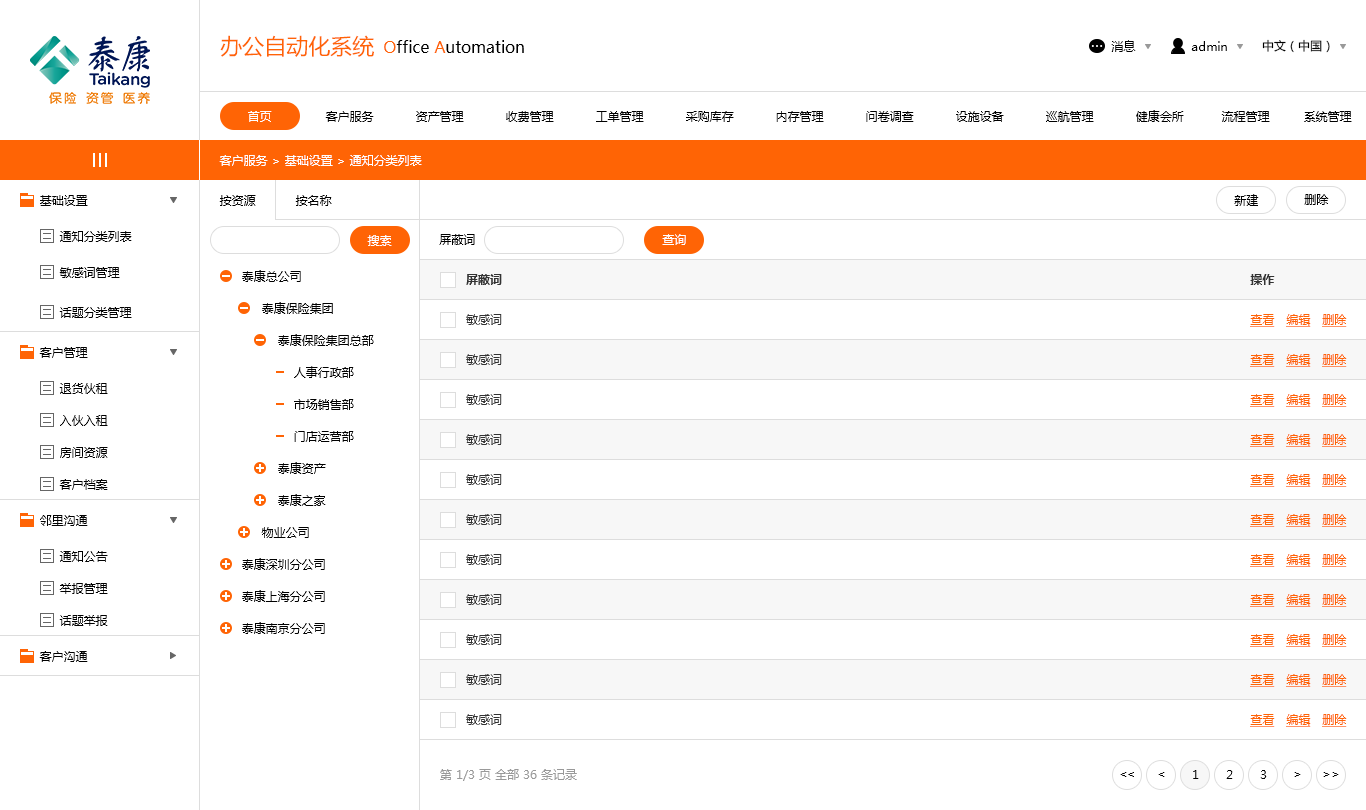
<style>
.page{position:relative;width:1366px;height:810px;background:#ffffff}
.page>*{position:absolute;margin:0}
.t1{font:22px "MicrosoftYaHei";color:#ff6405}
.t2{font:16px "MicrosoftYaHei";color:#000000}
.t3{font:16px "MicrosoftYaHei";color:#ff6405}
.t4{font:12px "MicrosoftYaHei";color:#010101}
.t5{font:12px "MicrosoftYaHei";color:#000000}
.t6{font:12px "MicrosoftYaHei";color:#ffffff}
.t7{font:12px/32px "MicrosoftYaHei";color:#000000}
.t8{font:12px/40px "MicrosoftYaHei";color:#333333}
.t9{font:12px/40px "MicrosoftYaHei-Bold";color:#333333}
.t10{font:12px/40px "MicrosoftYaHei";color:#ff6405;text-decoration:underline}
.t11{font:12px "MicrosoftYaHei";color:#999999}
.t12{font:12px "MicrosoftYaHei";letter-spacing:-0.1em;color:#000000}
</style>
<div class="page">
<p class="t1" style="left:220px;top:35px;width:154px;height:22px">办公自动化系统</p>
<p class="t2" style="left:384px;top:40px;width:140px;height:13px"><span class="t3">O</span>ffice<span class="t3"> A</span>utomation</p>
<p class="t4" style="left:1111px;top:40px;width:25px;height:12px">消息</p>
<p class="t5" style="left:1191px;top:41px;width:36px;height:10px">admin</p>
<p class="t5" style="left:1262px;top:39px;width:68px;height:14px">中文（中国）</p>
<p class="t6" style="left:248px;top:111px;width:24px;height:11px">首页</p>
<p class="t5" style="left:325px;top:111px;width:49px;height:11px">客户服务</p>
<p class="t5" style="left:416px;top:111px;width:48px;height:11px">资产管理</p>
<p class="t5" style="left:506px;top:111px;width:48px;height:11px">收费管理</p>
<p class="t5" style="left:596px;top:111px;width:48px;height:11px">工单管理</p>
<p class="t5" style="left:686px;top:111px;width:48px;height:11px">采购库存</p>
<p class="t5" style="left:776px;top:111px;width:48px;height:11px">内存管理</p>
<p class="t5" style="left:866px;top:111px;width:48px;height:11px">问卷调查</p>
<p class="t5" style="left:956px;top:111px;width:48px;height:11px">设施设备</p>
<p class="t5" style="left:1046px;top:111px;width:48px;height:11px">巡航管理</p>
<p class="t5" style="left:1136px;top:110px;width:48px;height:12px">健康会所</p>
<p class="t5" style="left:1221px;top:111px;width:49px;height:11px">流程管理</p>
<p class="t5" style="left:1304px;top:111px;width:48px;height:11px">系统管理</p>
<p class="t6" style="left:219px;top:155px;width:203px;height:11px">客户服务 &gt; 基础设置 &gt; 通知分类列表</p>
<p class="t5" style="left:40px;top:195px;width:48px;height:11px">基础设置</p>
<p class="t5" style="left:219px;top:195px;width:37px;height:11px">按资源</p>
<p class="t4" style="left:295px;top:195px;width:37px;height:11px">按名称</p>
<p class="t5" style="left:1234px;top:194px;width:25px;height:12px">新建</p>
<p class="t5" style="left:1304px;top:194px;width:25px;height:11px">删除</p>
<p class="t5" style="left:59px;top:231px;width:73px;height:11px">通知分类列表</p>
<p class="t6" style="left:367px;top:235px;width:25px;height:11px">搜索</p>
<p class="t5" style="left:439px;top:234px;width:36px;height:11px">屏蔽词</p>
<p class="t6" style="left:662px;top:234px;width:24px;height:11px">查询</p>
<p class="t5" style="left:59px;top:267px;width:61px;height:11px">敏感词管理</p>
<p class="t7" style="left:242px;top:270px;width:132px;height:364px">泰康总公司<br>     泰康保险集团 <br>         泰康保险集团总部<br>             人事行政部<br>             市场销售部<br>             门店运营部<br>         泰康资产<br>         泰康之家<br>     物业公司<br>泰康深圳分公司<br>泰康上海分公司<br>泰康南京分公司</p>
<p class="t8" style="left:466px;top:274px;width:36px;height:451px"><span class="t9">屏蔽词<br></span>敏感词<br>敏感词<br>敏感词<br>敏感词<br>敏感词<br>敏感词<br>敏感词<br>敏感词<br>敏感词<br>敏感词<br>敏感词</p>
<p class="t10" style="left:1250px;top:274px;width:97px;height:453px"><span class="t9">操作<br></span>查看   编辑   删除<br>查看   编辑   删除<br>查看   编辑   删除<br>查看   编辑   删除<br>查看   编辑   删除<br>查看   编辑   删除<br>查看   编辑   删除<br>查看   编辑   删除<br>查看   编辑   删除<br>查看   编辑   删除<br>查看   编辑   删除</p>
<p class="t5" style="left:59px;top:307px;width:73px;height:11px">话题分类管理</p>
<p class="t5" style="left:39px;top:347px;width:49px;height:11px">客户管理</p>
<p class="t5" style="left:59px;top:383px;width:49px;height:11px">退货伙租</p>
<p class="t5" style="left:60px;top:415px;width:48px;height:11px">入伙入租</p>
<p class="t5" style="left:60px;top:447px;width:48px;height:11px">房间资源</p>
<p class="t5" style="left:59px;top:479px;width:49px;height:11px">客户档案</p>
<p class="t5" style="left:40px;top:515px;width:48px;height:11px">邻里沟通</p>
<p class="t5" style="left:59px;top:551px;width:49px;height:11px">通知公告</p>
<p class="t5" style="left:59px;top:583px;width:49px;height:11px">举报管理</p>
<p class="t5" style="left:59px;top:615px;width:49px;height:11px">话题举报</p>
<p class="t5" style="left:39px;top:651px;width:49px;height:11px">客户沟通</p>
<p class="t11" style="left:440px;top:769px;width:137px;height:12px">第 1/3 页 全部 36 条记录</p>
<p class="t12" style="left:1120px;top:772px;width:14px;height:5px">&lt;&lt;</p>
<p class="t5" style="left:1158px;top:772px;width:7px;height:5px">&lt;</p>
<p class="t5" style="left:1193px;top:770px;width:6px;height:9px">1</p>
<p class="t5" style="left:1226px;top:770px;width:7px;height:9px">2</p>
<p class="t5" style="left:1260px;top:770px;width:7px;height:9px">3</p>
<p class="t5" style="left:1294px;top:772px;width:7px;height:5px">&gt;</p>
<p class="t5" style="left:1323px;top:772px;width:16px;height:5px">&gt;&gt;</p>
</div>
